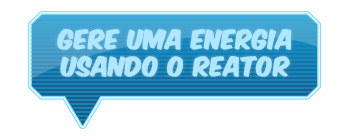
<style>
.page{position:relative;width:350px;height:140px;background:#ffffff}
.page>*{position:absolute;margin:0}
.t1{font:22.6px "KomikaAxis";color:#b0e6ff;font-weight:bold}
</style>
<div class="page">
<p class="t1" style="left:57px;top:29px;width:235px;height:48px;text-align:center">GERE UMA ENERGIA<br>USANDO O REATOR</p>
</div>
